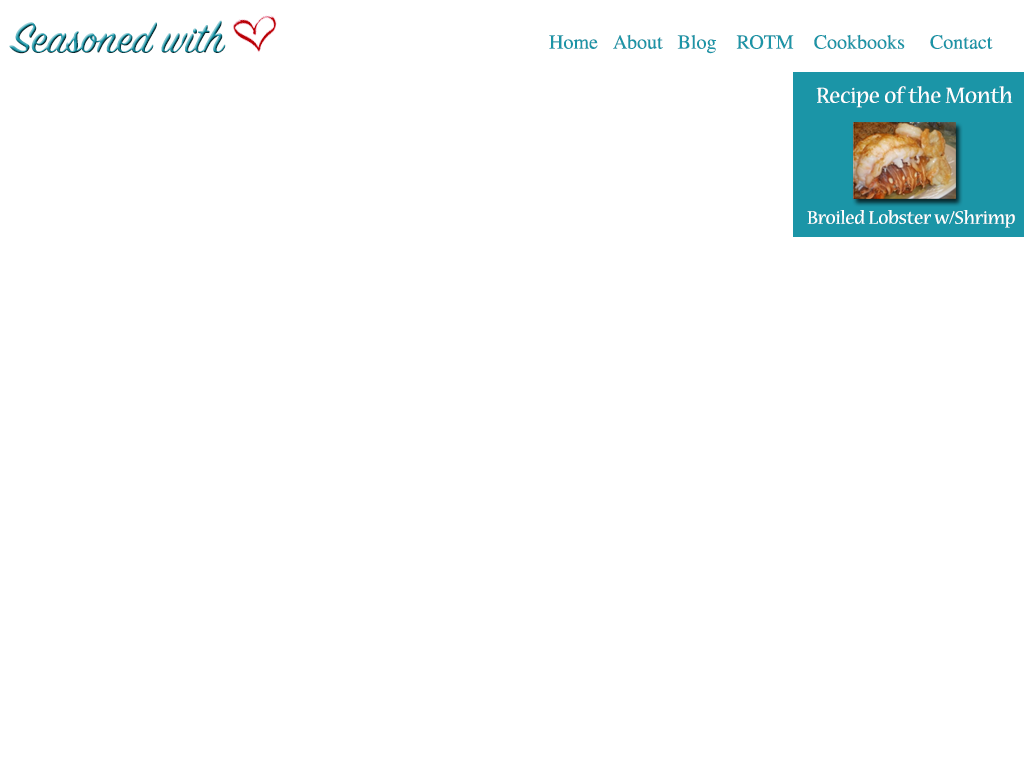
<style>
.page{position:relative;width:1024px;height:768px;background:#ffffff}
.page>*{position:absolute;margin:0}
.t1{font:48px "SignPainter-HouseScript"}
.t2{font:20px "STIXGeneral-Regular";color:#1b95a7}
.t3{font:24px "NuevaStd-Regular";color:#ffffff}
.t4{font:20px "NuevaStd-Regular";color:#ffffff}
</style>
<div class="page">
<p class="t1" style="left:9px;top:20px;width:217px;height:34px">Seasoned with</p>
<p class="t2" style="left:549px;top:34px;width:444px;height:20px">Home   About   Blog    ROTM    Cookbooks     Contact</p>
<p class="t3" style="left:816px;top:86px;width:197px;height:22px">Recipe of the Month</p>
<p class="t4" style="left:807px;top:210px;width:208px;height:18px">Broiled Lobster w/Shrimp Sauce</p>
</div>
